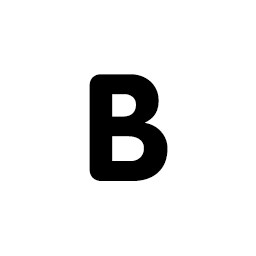
<style>
.page{position:relative;width:256px;height:256px;background:#ffffff}
.page>*{position:absolute;margin:0}
.t1{font:150px "RotondaC-Bold";color:#000000}
</style>
<div class="page">
<p class="t1" style="left:89px;top:74px;width:79px;height:107px">B</p>
</div>
